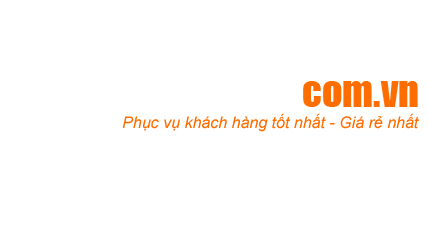
<style>
.page{position:relative;width:428px;height:230px;background:#ffffff}
.page>*{position:absolute;margin:0}
.t1{font:40px "Impact";color:#ffffff}
.t2{font:40px "Impact";color:#fe6d00}
.t3{font:16px "Arial-ItalicMT";color:#fe6d00}
</style>
<div class="page">
<p class="t1" style="left:100px;top:75px;width:318px;height:36px">ShopCuaTui.<span class="t2">com.vn</span></p>
<p class="t3" style="left:122px;top:113px;width:297px;height:19px">Phục vụ khách hàng tốt nhất - Giá rẻ nhất</p>
</div>
